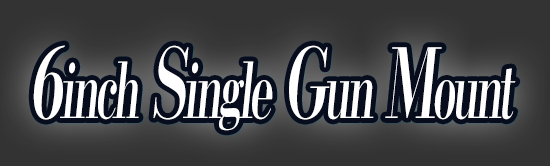
<style>
.page{position:relative;width:550px;height:166px;background:#333333}
.page>*{position:absolute;margin:0}
.t1{font:76.8px "KochoStd-Heavy";letter-spacing:-0.08em;color:#ffffff;font-style:italic;scale:0.57 1}
.t2{font:96px "KochoStd-Heavy";letter-spacing:-0.08em;color:#ffffff;font-style:italic;scale:0.57 1}
</style>
<div class="page">
<p class="t1" style="left:33px;top:45px;width:483px;height:86px"><span class="t2">6</span>inch<span class="t2"> S</span>ingle<span class="t2"> G</span>un<span class="t2"> M</span>ount</p>
</div>
